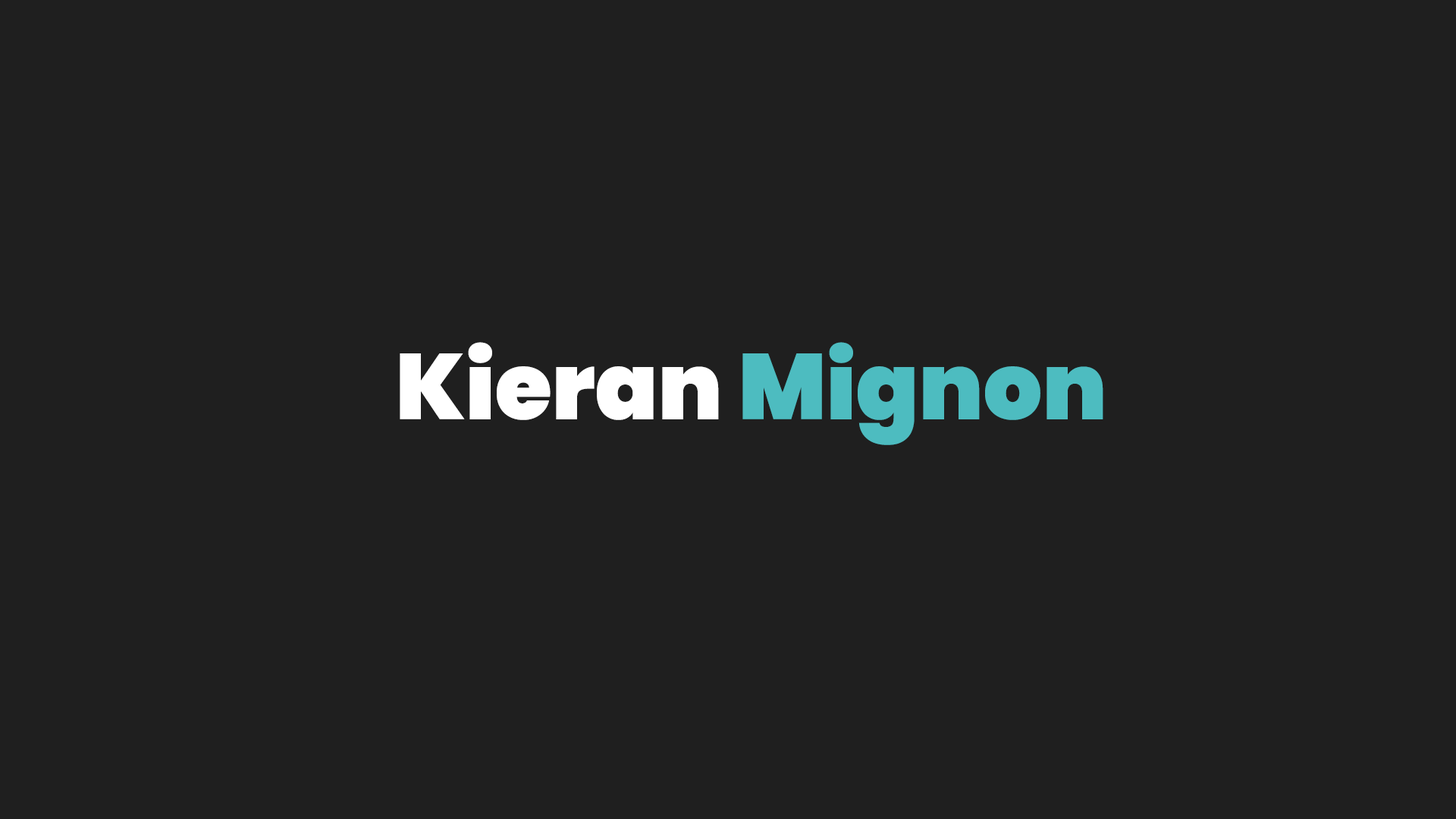
<style>
.page{position:relative;width:1456px;height:819px;background:#1f1f1f}
.page>*{position:absolute;margin:0}
.t1{font:92.5px "Poppins-Black";color:#ffffff}
.t2{font:92.5px "Poppins-Black";color:#4dbcc0}
</style>
<div class="page">
<p class="t1" style="left:400px;top:342px;width:703px;height:103px">Kieran <span class="t2">Mignon</span></p>
</div>
